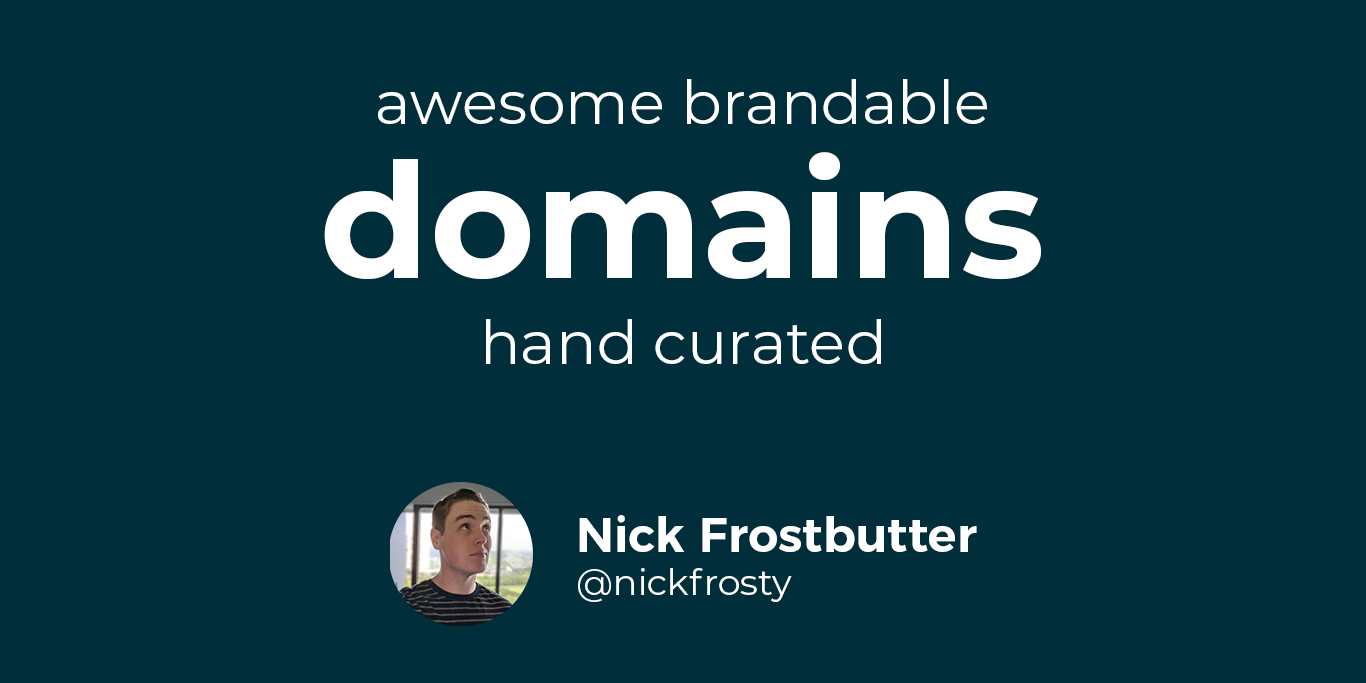
<style>
.page{position:relative;width:1366px;height:683px;background:#002e3b}
.page>*{position:absolute;margin:0}
.t1{font:60px "Montserrat-Regular";color:#ffffff}
.t2{font:160px "Montserrat-Bold";color:#ffffff}
.t3{font:48px "Montserrat-SemiBold";color:#ffffff}
.t4{font:36px "Montserrat-Regular";color:#ffffff}
</style>
<div class="page">
<p class="t1" style="left:378px;top:79px;width:609px;height:45px">awesome brandable</p>
<p class="t2" style="left:324px;top:152px;width:717px;height:128px">domains</p>
<p class="t1" style="left:486px;top:319px;width:395px;height:45px">hand curated</p>
<p class="t3" style="left:578px;top:515px;width:399px;height:87px">Nick Frostbutter<br><span class="t4">@nickfrosty</span></p>
</div>
